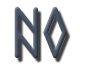
<style>
.page{position:relative;width:85px;height:64px;background:#ffffff}
.page>*{position:absolute;margin:0}
.t1{font:64px "ComicRunes";color:#4a5363}
</style>
<div class="page">
<p class="t1" style="left:14px;top:6px;width:53px;height:52px">NO</p>
</div>
